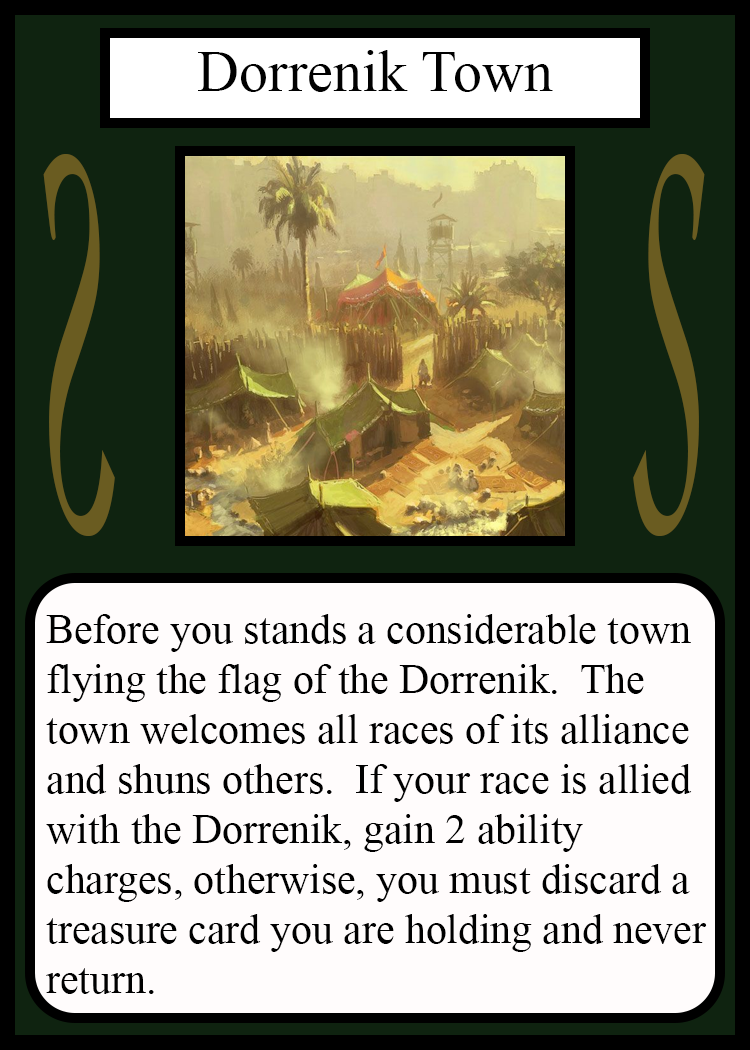
<style>
.page{position:relative;width:750px;height:1050px;background:#fffcfc}
.page>*{position:absolute;margin:0}
.t1{font:58.3px "TimesNewRomanPSMT";color:#010101}
.t2{font:548.5px "Apple-Chancery";color:#6a5c21;scale:0.27 1}
.t3{font:548.2px "Apple-Chancery";color:#6a5c21;scale:0.27 1}
.t4{font:41.7px "TimesNewRomanPSMT";color:#000000}
</style>
<div class="page">
<p class="t1" style="left:198px;top:50px;width:355px;height:42px">Dorrenik Town</p>
<p class="t2" style="left:43px;top:154px;width:72px;height:382px;rotate:180deg">S</p>
<p class="t3" style="left:633px;top:154px;width:72px;height:382px">S</p>
<p class="t4" style="left:46px;top:614px;width:661px;height:380px">Before you stands a considerable town<br>flying the flag of the Dorrenik.  The<br>town welcomes all races of its alliance<br>and shuns others.  If your race is allied<br>with the Dorrenik, gain 2 ability <br>charges, otherwise, you must discard a<br>treasure card you are holding and never<br>return.</p>
</div>
